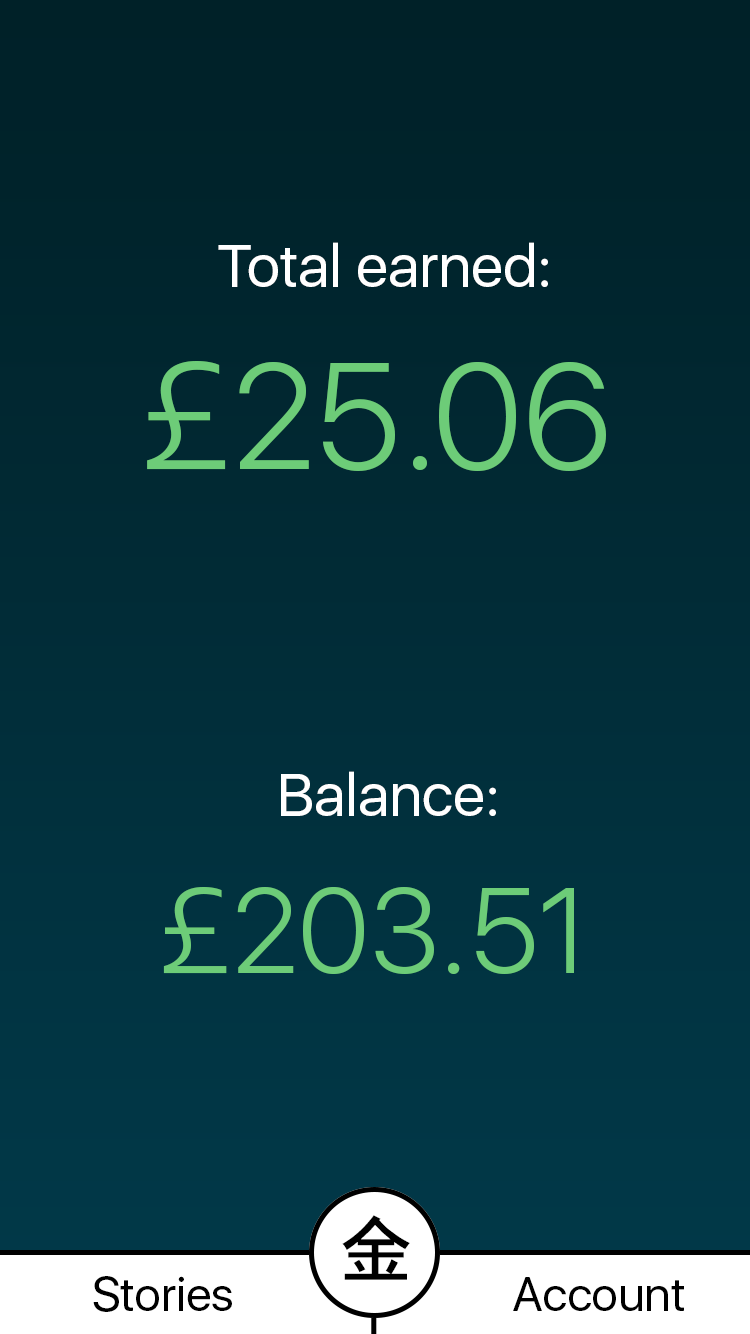
<style>
.page{position:relative;width:750px;height:1334px}
.page>*{position:absolute;margin:0}
.t1{font:60px "SFUIDisplay-Regular";color:#ffffff}
.t2{font:150px "SFUIDisplay-Light";color:#6dcc78}
.t3{font:120px "SFUIDisplay-Light";color:#6dcc78}
.t4{font:72px "Osaka";color:#000000}
.t5{font:48px "SFUIDisplay-Regular";color:#000000}
</style>
<div class="page">
<p class="t1" style="left:218px;top:242px;width:330px;height:45px">Total earned:</p>
<p class="t2" style="left:147px;top:361px;width:459px;height:110px">£25.06</p>
<p class="t1" style="left:281px;top:771px;width:215px;height:45px">Balance:</p>
<p class="t3" style="left:163px;top:887px;width:411px;height:87px">£203.51</p>
<p class="t4" style="left:342px;top:1215px;width:68px;height:65px">金</p>
<p class="t5" style="left:93px;top:1276px;width:139px;height:36px">Stories</p>
<p class="t5" style="left:513px;top:1277px;width:171px;height:34px">Account</p>
</div>
